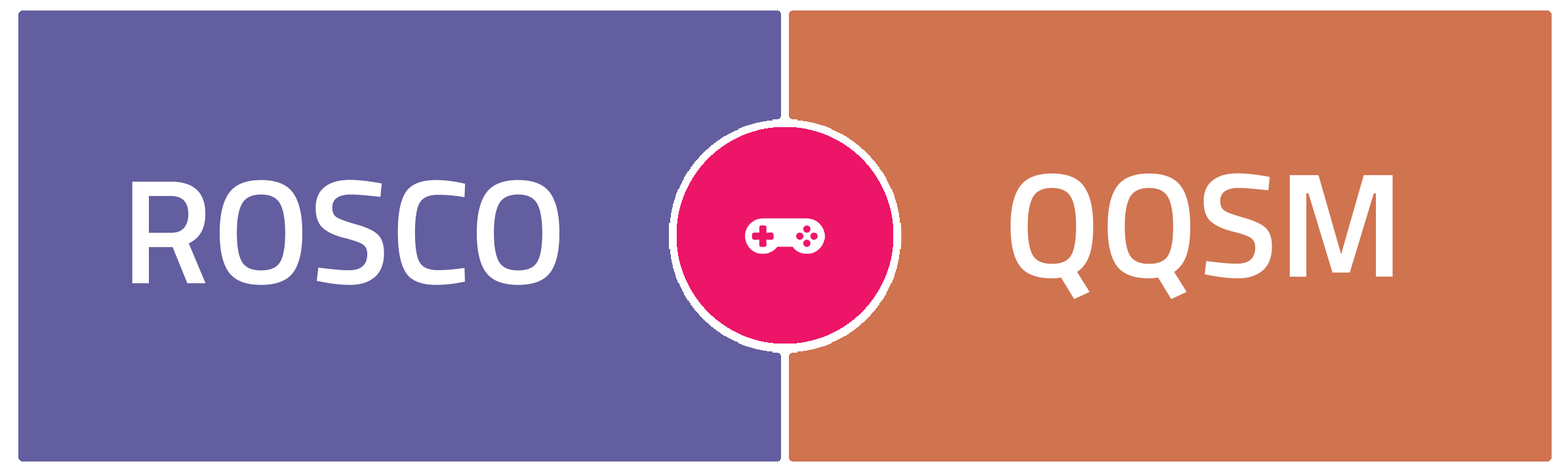
<style>
.page{position:relative;width:1568px;height:472px;background:#d0734f}
.page>*{position:absolute;margin:0}
.t1{font:148.1px "TitilliumWeb-SemiBold";color:#ffffff}
</style>
<div class="page">
<p class="t1" style="left:1011px;top:173px;width:382px;height:127px">QQSM</p>
<p class="t1" style="left:132px;top:180px;width:427px;height:105px">ROSCO</p>
</div>
